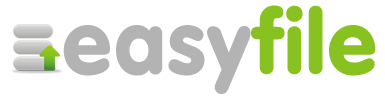
<style>
.page{position:relative;width:385px;height:97px;background:#ffffff}
.page>*{position:absolute;margin:0}
.t1{font:90px "VagRoundedBlack";letter-spacing:0.04em;color:#b4b3b3}
.t2{font:90px "VagRoundedBlack";letter-spacing:0.04em;color:#88c220}
</style>
<div class="page">
<p class="t1" style="left:63px;top:5px;width:313px;height:89px">easy<span class="t2">file</span></p>
</div>
